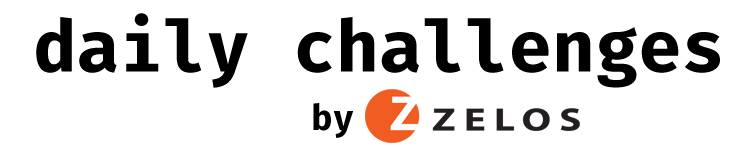
<style>
.page{position:relative;width:750px;height:156px;background:#ffffff}
.page>*{position:absolute;margin:0}
.t1{font:72px "FiraCode-Bold";color:#000000}
.t2{font:36px "FiraCode-Bold";color:#000000}
</style>
<div class="page">
<p class="t1" style="left:36px;top:13px;width:684px;height:75px">daily challenges</p>
<p class="t2" style="left:313px;top:103px;width:41px;height:35px">by</p>
</div>
